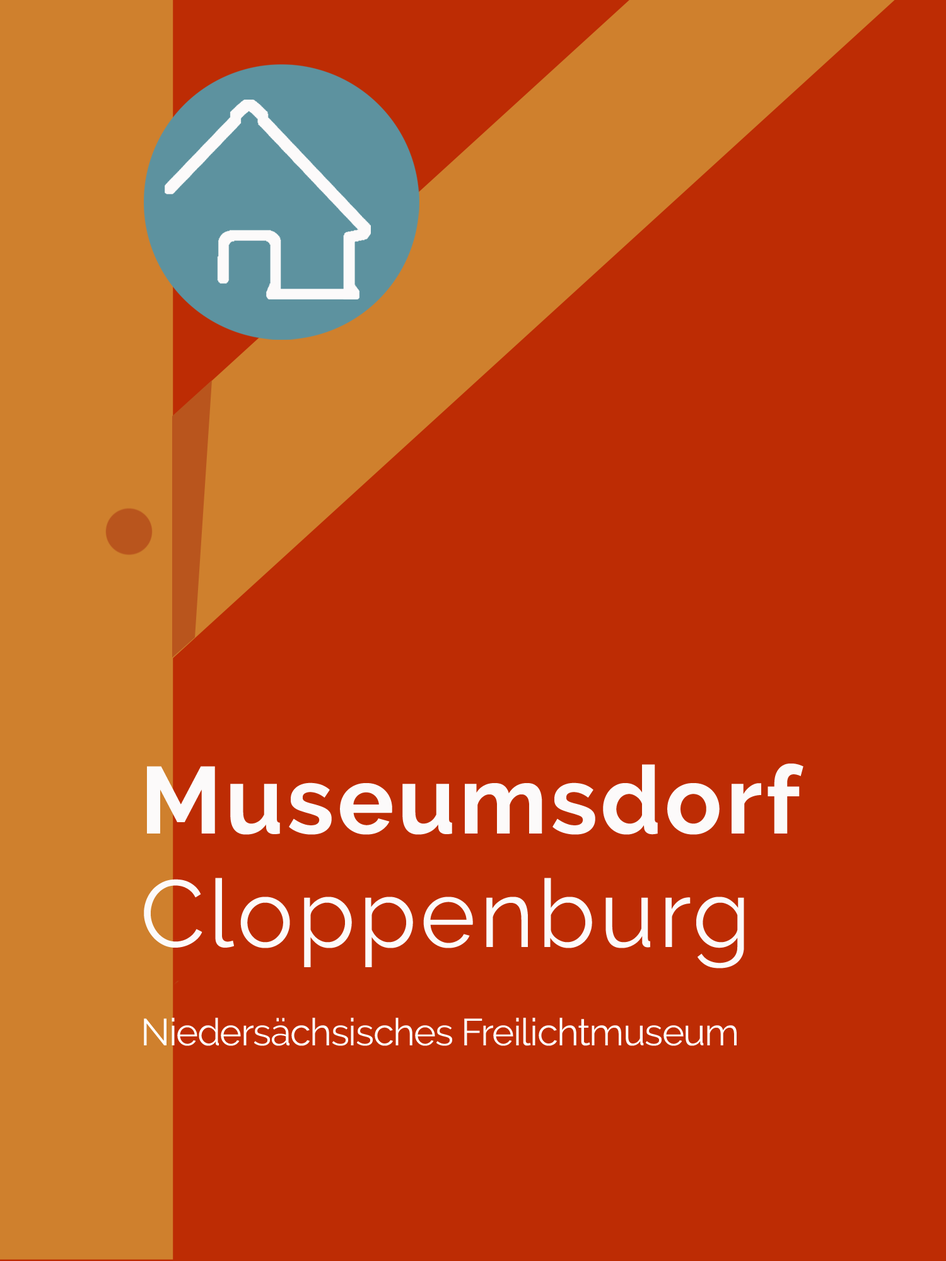
<style>
.page{position:relative;width:946px;height:1261px;background:#bd2c04}
.page>*{position:absolute;margin:0}
.t1{font:94.6px "Raleway-Bold";letter-spacing:0.035em;color:#fcfafa}
.t2{font:94.6px "Raleway-Regular";letter-spacing:0.035em;color:#fcfafa}
.t3{font:37.8px "Raleway-Regular";letter-spacing:-0.027em;color:#ffffff}
</style>
<div class="page">
<p class="t1" style="left:144px;top:763px;width:659px;height:205px">Museumsdorf<br><span class="t2">Cloppenburg</span></p>
<p class="t3" style="left:144px;top:1018px;width:592px;height:28px">Niedersächsisches Freilichtmuseum</p>
</div>
